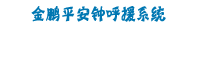
<style>
.page{position:relative;width:203px;height:70px;background:#ffffff}
.page>*{position:absolute;margin:0}
.t1{font:17.6px "HYn3gj";letter-spacing:-0.09em;color:#0077b2;font-weight:bold;scale:0.91 1}
</style>
<div class="page">
<p class="t1" style="left:31px;top:6px;width:135px;height:16px">金鹏平安钟呼援系统</p>
</div>
